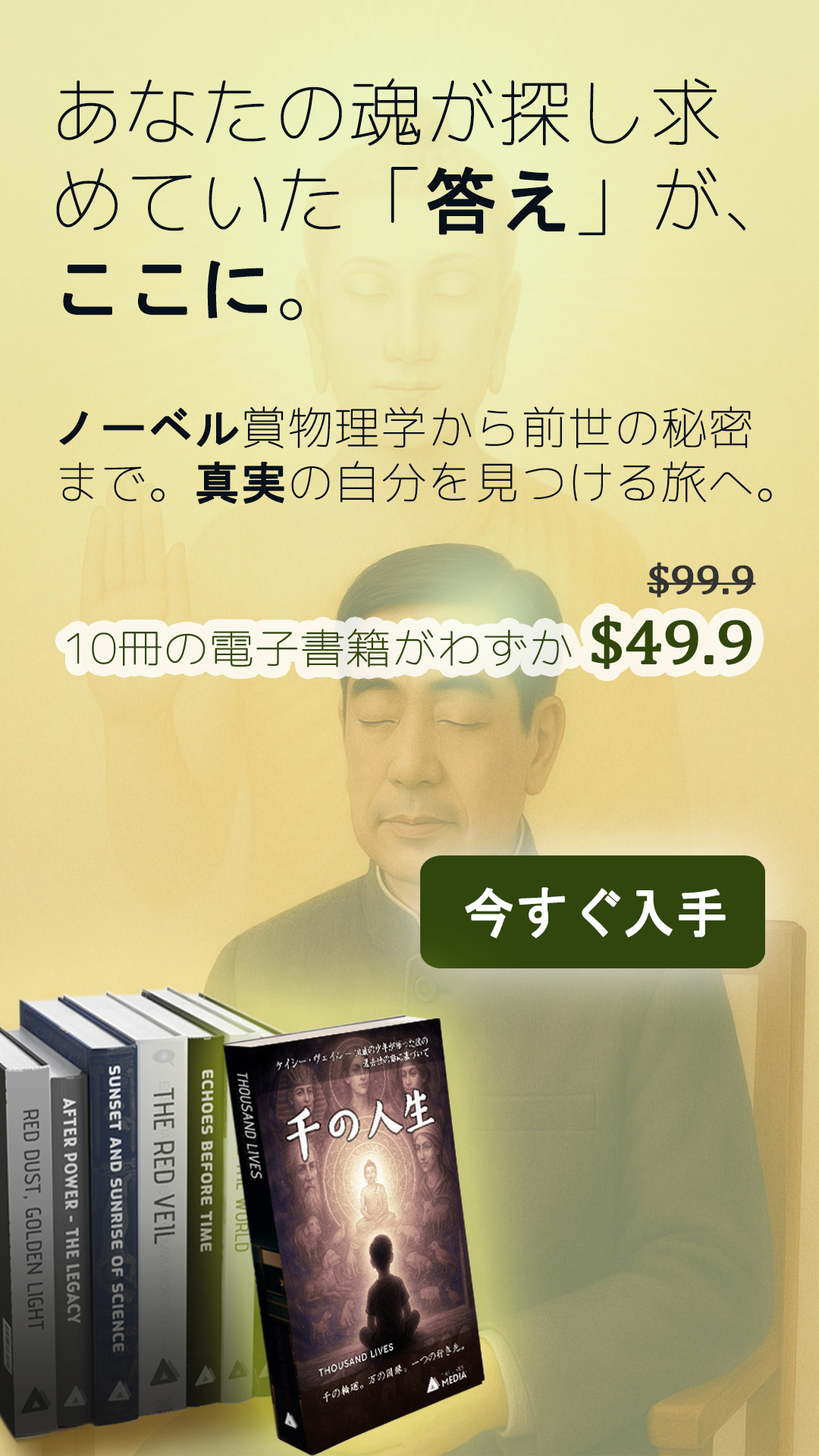
<style>
.page{position:relative;width:819px;height:1456px}
.page>*{position:absolute;margin:0}
.t1{font:72.8px/88px "Chogokuboso-Gothic";color:#08101a;font-weight:bold}
.t2{font:72.8px/88px "MS-Gothic";color:#08101a;font-weight:bold}
.t3{font:45px/54.6px "Chogokuboso-Gothic";letter-spacing:0.01em;color:#08101a;font-weight:bold}
.t4{font:45px/54.6px "MS-Gothic";letter-spacing:0.01em;color:#08101a;font-weight:bold}
.t5{font:40.9px "Cambria";letter-spacing:-0.025em;color:#333333;font-weight:bold;scale:1.11 1}
.t6{font:40.9px "Chogokuboso-Gothic";letter-spacing:-0.025em;color:#31460c;font-weight:bold;scale:1.11 1}
.t7{font:40.9px "Cambria";letter-spacing:-0.025em;color:#31460c;font-weight:bold;scale:1.11 1}
.t8{font:62.8px "Cambria";letter-spacing:-0.025em;color:#31460c;font-weight:bold;scale:1.11 1}
.t9{font:54.6px "MS-Gothic";color:#fefefe;font-weight:bold;scale:0.95 1}
</style>
<div class="page">
<p class="t1" style="left:56px;top:78px;width:689px;height:243px">あなたの魂が探し求<br>めていた「<span class="t2">答え</span>」が、<span class="t2">ここに</span>。</p>
<p class="t3" style="left:59px;top:406px;width:713px;height:98px"><span class="t4">ノーベル</span>賞物理学から前世の秘密<br>まで。<span class="t4">真実</span>の自分を見つける旅へ。</p>
<p class="t5" style="left:647px;top:562px;width:109px;height:36px">$99.9</p>
<p class="t6" style="left:67px;top:615px;width:684px;height:55px"><span class="t7"><br></span>10冊の電子書籍がわずか<span class="t8"> $49.9</span></p>
<p class="t9" style="left:465px;top:887px;width:261px;height:52px">今すぐ入手</p>
</div>
